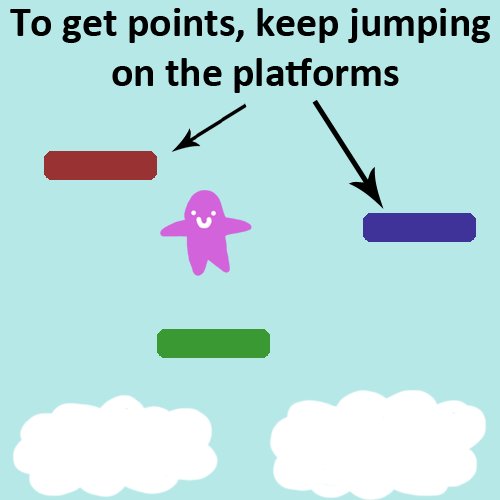
<style>
.page{position:relative;width:500px;height:500px;background:#b6e8e7}
.page>*{position:absolute;margin:0}
.t1{font:41.7px "Calibri-Bold";color:#000000}
</style>
<div class="page">
<p class="t1" style="left:10px;top:8px;width:481px;height:85px;text-align:center">To get points, keep jumping <br>on the platforms</p>
</div>
